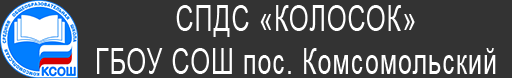
<style>
.page{position:relative;width:512px;height:78px;background:#333333}
.page>*{position:absolute;margin:0}
.t1{font:35.9px "ArialMT";letter-spacing:0.04em;color:#ffffff;scale:0.7 1}
</style>
<div class="page">
<p class="t1" style="left:97px;top:5px;width:399px;height:69px;text-align:center">СПДС «КОЛОСОК»<br>ГБОУ СОШ пос. Комсомольский</p>
</div>
